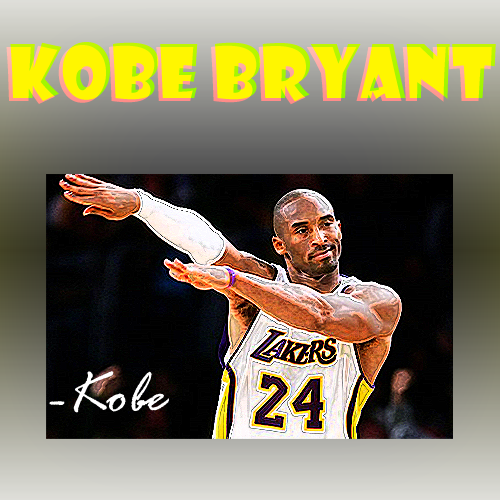
<style>
.page{position:relative;width:500px;height:500px}
.page>*{position:absolute;margin:0}
.t1{font:72px "ShowcardGothic-Reg";color:#fff600}
.t2{font:60px "RageItalic";color:#ffffff}
</style>
<div class="page">
<p class="t1" style="left:6px;top:45px;width:486px;height:60px">kobe bryant</p>
<p class="t1" style="left:10px;top:42px;width:486px;height:60px">kobe bryant</p>
<p class="t2" style="left:49px;top:371px;width:120px;height:42px">-Kobe</p>
</div>
